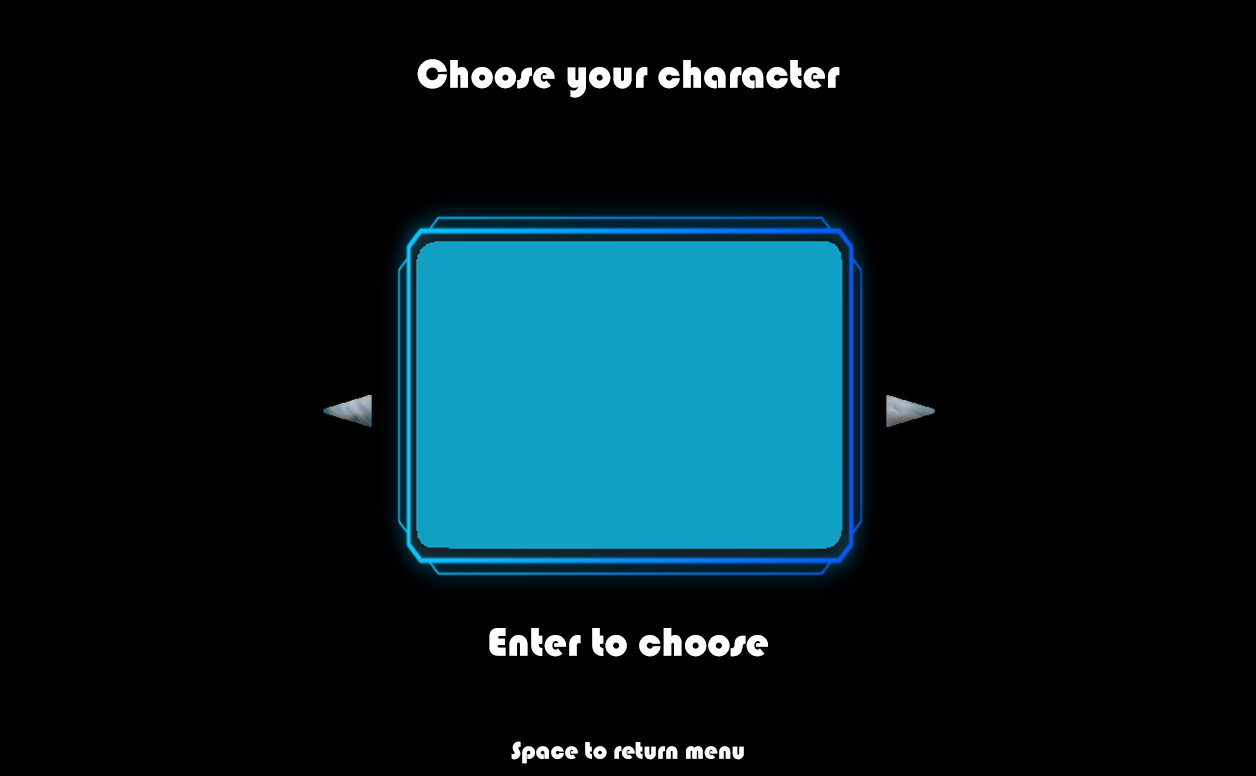
<style>
.page{position:relative;width:1256px;height:776px;background:#000000}
.page>*{position:absolute;margin:0}
.t1{font:41.7px "Bauhaus93";color:#ffffff}
.t2{font:25px "Bauhaus93";color:#ffffff}
</style>
<div class="page">
<p class="t1" style="left:417px;top:59px;width:423px;height:39px">Choose your character</p>
<p class="t1" style="left:489px;top:628px;width:279px;height:29px">Enter to choose</p>
<p class="t2" style="left:511px;top:741px;width:233px;height:23px">Space to return menu</p>
</div>
